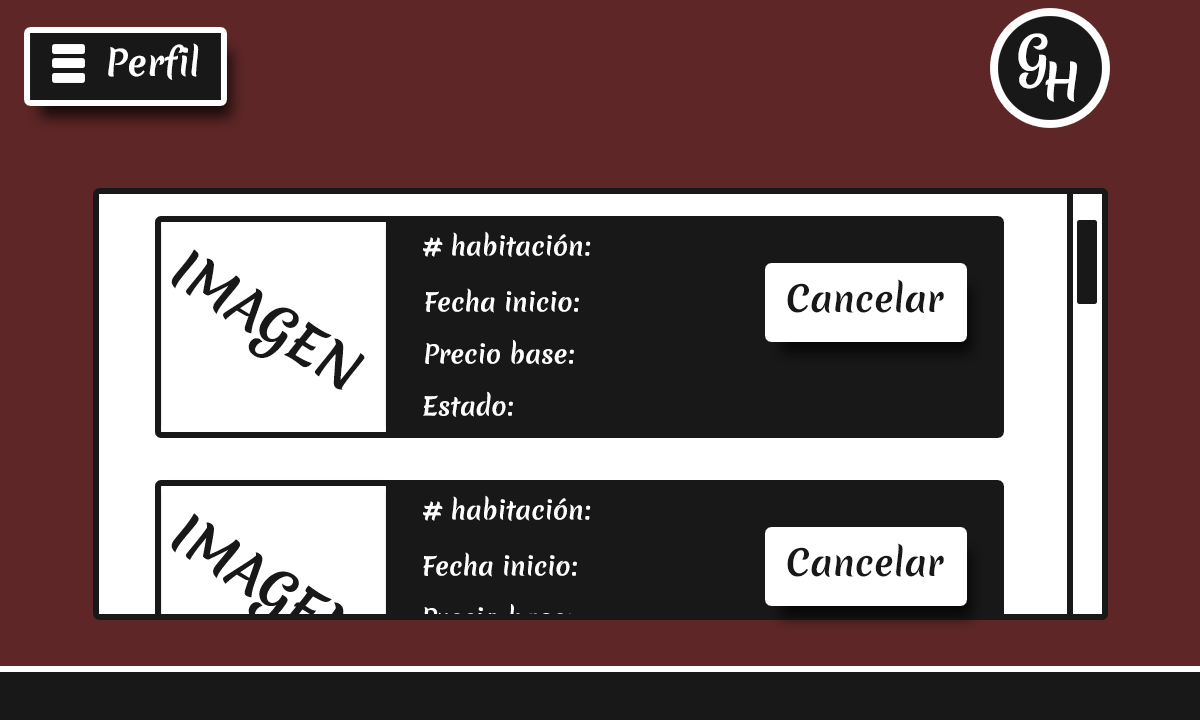
<style>
.page{position:relative;width:1200px;height:720px;background:#5e2626}
.page>*{position:absolute;margin:0}
.t1{font:48.4px "MeriendaOne-Regular";color:#ffffff}
.t2{font:35.1px "MeriendaOne-Regular";color:#ffffff}
.t3{font:24.6px "MeriendaOne-Regular";color:#ffffff}
.t4{font:51.9px "MeriendaOne-Regular";color:#181818}
.t5{font:35.1px "MeriendaOne-Regular";color:#181818}
</style>
<div class="page">
<p class="t1" style="left:1018px;top:33px;width:30px;height:56px">G</p>
<p class="t2" style="left:108px;top:43px;width:91px;height:37px">Perfil</p>
<p class="t1" style="left:1045px;top:61px;width:32px;height:41px">H</p>
<p class="t3" style="left:423px;top:231px;width:168px;height:26px"># habitación:</p>
<p class="t4" style="left:171px;top:249px;width:194px;height:141px;rotate:32deg">IMAGEN</p>
<p class="t5" style="left:787px;top:279px;width:157px;height:35px">Cancelar</p>
<p class="t3" style="left:425px;top:288px;width:154px;height:25px">Fecha inicio:</p>
<p class="t3" style="left:425px;top:339px;width:149px;height:26px">Precio base:</p>
<p class="t3" style="left:423px;top:391px;width:90px;height:26px">Estado:</p>
<p class="t3" style="left:423px;top:495px;width:168px;height:26px"># habitación:</p>
<p class="t5" style="left:787px;top:543px;width:157px;height:35px">Cancelar</p>
<p class="t3" style="left:423px;top:552px;width:154px;height:25px">Fecha inicio:</p>
</div>
